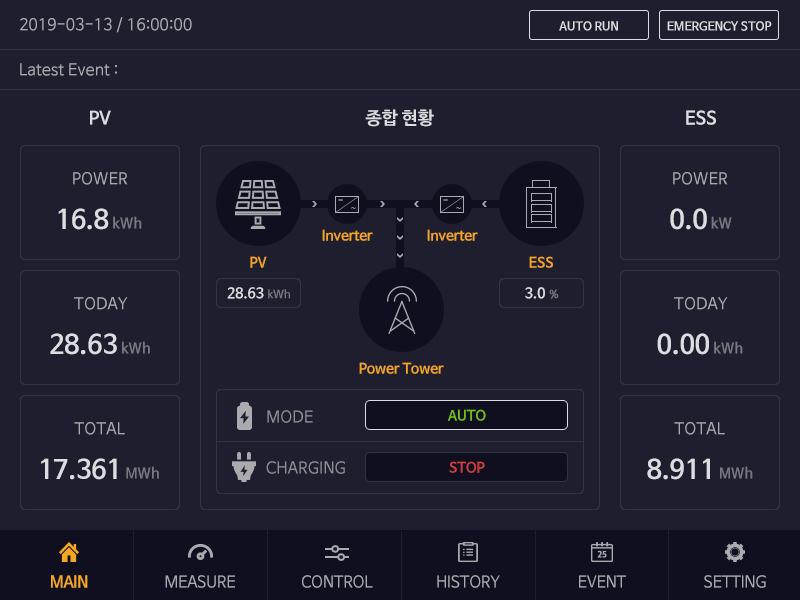
<style>
.page{position:relative;width:800px;height:600px;background:#1e1e2f}
.page>*{position:absolute;margin:0}
.t1{font:16px "NanumBarunGothic";color:#aaaaaf}
.t2{font:12px "NanumBarunGothicBold";color:#dcdce1}
.t3{font:18px "NanumBarunGothicBold";color:#dcdce1}
.t4{font:26px "NanumBarunGothicBold";color:#dcdce1}
.t5{font:14px "NanumBarunGothicBold";color:#787882}
.t6{font:9.7px "NanumBarunGothicBold"}
.t7{font:9.7px "NanumBarunGothic"}
.t8{font:14px "NanumBarunGothicBold";color:#f5a623}
.t9{font:14px "NanumBarunGothicBold";color:#dcdce1}
.t10{font:11px "NanumBarunGothicBold";color:#787882}
.t11{font:16px "NanumBarunGothic";color:#8f8f96}
.t12{font:14px "NanumBarunGothicBold";color:#71c016}
.t13{font:14px "NanumBarunGothicBold";color:#d33f3f}
.t14{font:16px "NanumBarunGothicBold";letter-spacing:-0.025em;color:#f5a623}
.t15{font:16px "NanumBarunGothic";letter-spacing:-0.025em;color:#aaaaaf}
</style>
<div class="page">
<p class="t1" style="left:20px;top:17px;width:172px;height:16px">2019-03-13 / 16:00:00</p>
<p class="t2" style="left:559px;top:21px;width:59px;height:10px">AUTO RUN</p>
<p class="t2" style="left:667px;top:21px;width:105px;height:10px">EMERGENCY STOP</p>
<p class="t1" style="left:20px;top:63px;width:97px;height:13px">Latest Event :</p>
<p class="t3" style="left:90px;top:110px;width:21px;height:15px">PV</p>
<p class="t3" style="left:365px;top:109px;width:69px;height:18px">종합 현황</p>
<p class="t3" style="left:686px;top:110px;width:30px;height:15px">ESS</p>
<p class="t1" style="left:73px;top:172px;width:55px;height:13px">POWER</p>
<p class="t1" style="left:673px;top:172px;width:55px;height:13px">POWER</p>
<p class="t4" style="left:58px;top:208px;width:84px;height:22px">16.8 <span class="t5">kWh</span></p>
<p class="t6" style="left:338px;top:199px;width:5px;height:2px">-</p>
<p class="t7" style="left:351px;top:207px;width:5px;height:2px">~</p>
<p class="t6" style="left:443px;top:199px;width:5px;height:2px">-</p>
<p class="t7" style="left:456px;top:207px;width:5px;height:2px">~</p>
<p class="t4" style="left:670px;top:208px;width:62px;height:22px">0.0 <span class="t5">kW</span></p>
<p class="t8" style="left:322px;top:229px;width:51px;height:12px">Inverter</p>
<p class="t8" style="left:427px;top:229px;width:51px;height:12px">Inverter</p>
<p class="t8" style="left:250px;top:256px;width:17px;height:12px">PV</p>
<p class="t8" style="left:529px;top:256px;width:24px;height:12px">ESS</p>
<p class="t9" style="left:227px;top:287px;width:63px;height:12px">28.63 <span class="t10">kWh</span></p>
<p class="t9" style="left:525px;top:287px;width:34px;height:12px">3.0 <span class="t10">%</span></p>
<p class="t1" style="left:74px;top:297px;width:54px;height:13px">TODAY</p>
<p class="t1" style="left:674px;top:297px;width:54px;height:13px">TODAY</p>
<p class="t4" style="left:50px;top:333px;width:100px;height:22px">28.63 <span class="t5">kWh</span></p>
<p class="t4" style="left:657px;top:333px;width:86px;height:22px">0.00 <span class="t5">kWh</span></p>
<p class="t8" style="left:359px;top:362px;width:85px;height:12px">Power Tower</p>
<p class="t11" style="left:267px;top:410px;width:46px;height:13px">MODE</p>
<p class="t12" style="left:448px;top:409px;width:38px;height:12px">AUTO</p>
<p class="t1" style="left:74px;top:422px;width:51px;height:13px">TOTAL</p>
<p class="t1" style="left:674px;top:422px;width:51px;height:13px">TOTAL</p>
<p class="t4" style="left:41px;top:458px;width:118px;height:22px">17.361 <span class="t5">MWh</span></p>
<p class="t11" style="left:266px;top:461px;width:79px;height:13px">CHARGING</p>
<p class="t13" style="left:449px;top:461px;width:36px;height:12px">STOP</p>
<p class="t4" style="left:647px;top:458px;width:106px;height:22px">8.911 <span class="t5">MWh</span></p>
<p class="t14" style="left:51px;top:575px;width:37px;height:13px">MAIN</p>
<p class="t15" style="left:165px;top:575px;width:70px;height:13px">MEASURE</p>
<p class="t15" style="left:302px;top:575px;width:71px;height:13px">CONTROL</p>
<p class="t15" style="left:437px;top:575px;width:63px;height:13px">HISTORY</p>
<p class="t15" style="left:579px;top:575px;width:47px;height:13px">EVENT</p>
<p class="t15" style="left:704px;top:575px;width:62px;height:13px">SETTING</p>
</div>
